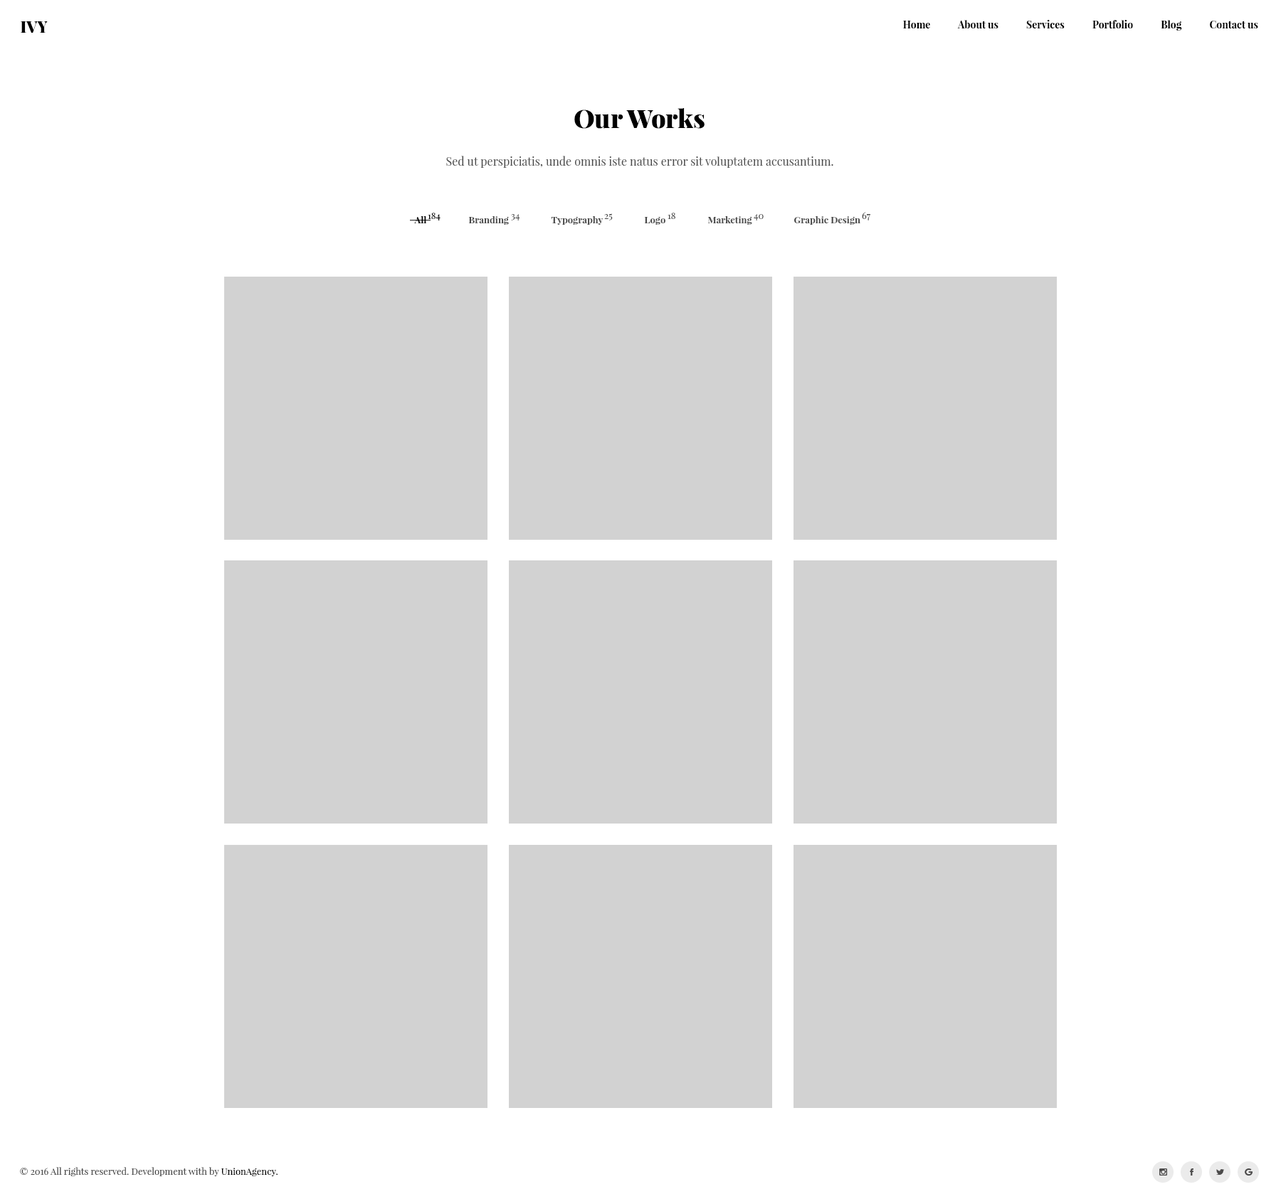
<style>
.page{position:relative;width:1281px;height:1204px;background:#ffffff}
.page>*{position:absolute;margin:0}
.t1{font:15.7px "PlayfairDisplay-Black";color:#000000}
.t2{font:10px "PlayfairDisplay-Bold";color:#000000}
.t3{font:25.6px "PlayfairDisplay-Black";color:#000000}
.t4{font:11.4px "PlayfairDisplay-Regular";color:#494949}
.t5{font:9px "PlayfairDisplay-Bold";color:#000000}
.t6{font:9px "PlayfairDisplay-Regular";color:#000000}
.t7{font:9px "PlayfairDisplay-Bold";color:#494949}
.t8{font:9px "PlayfairDisplay-Regular";color:#494949}
.t9{font:9.2px "PlayfairDisplay-Regular";color:#494949}
.t10{font:9.2px "PlayfairDisplay-Regular";color:#000000}
</style>
<div class="page">
<p class="t1" style="left:21px;top:21px;width:27px;height:12px">IVY</p>
<p class="t2" style="left:903px;top:20px;width:355px;height:11px">Home            About us            Services            Portfolio            Blog            Contact us</p>
<p class="t3" style="left:574px;top:108px;width:130px;height:21px">Our Works</p>
<p class="t4" style="left:446px;top:156px;width:387px;height:12px">Sed ut perspiciatis, unde omnis iste natus error sit voluptatem accusantium.</p>
<p class="t5" style="left:414px;top:216px;width:12px;height:7px">All</p>
<p class="t6" style="left:428px;top:213px;width:12px;height:8px">184</p>
<p class="t7" style="left:468px;top:216px;width:41px;height:9px">Branding</p>
<p class="t8" style="left:511px;top:214px;width:9px;height:7px">34</p>
<p class="t7" style="left:551px;top:216px;width:52px;height:9px">Typography</p>
<p class="t8" style="left:604px;top:213px;width:9px;height:8px">25</p>
<p class="t7" style="left:644px;top:217px;width:21px;height:8px">Logo</p>
<p class="t8" style="left:667px;top:213px;width:8px;height:6px">18</p>
<p class="t7" style="left:708px;top:216px;width:44px;height:9px">Marketing</p>
<p class="t8" style="left:753px;top:214px;width:10px;height:7px">40</p>
<p class="t7" style="left:794px;top:216px;width:66px;height:9px">Graphic Design</p>
<p class="t8" style="left:862px;top:212px;width:8px;height:9px">67</p>
<p class="t9" style="left:20px;top:1167px;width:258px;height:10px">© 2016 All rights reserved. Development with by <span class="t10">UnionAgency.</span></p>
</div>
